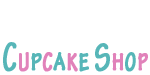
<style>
.page{position:relative;width:150px;height:75px;background:#ffffff}
.page>*{position:absolute;margin:0}
.t1{font:41.6px "TektonPro-BoldCond";color:#57b6b8;font-variant:small-caps;font-weight:bold;scale:0.77 1}
.t2{font:36.4px "TektonPro-BoldCond";color:#e183bb;font-variant:small-caps;font-weight:bold;scale:0.77 1}
.t3{font:36.4px "TektonPro-BoldCond";color:#57b6b8;font-variant:small-caps;font-weight:bold;scale:0.77 1}
.t4{font:36.4px "TektonPro-BoldCond";color:#e182ba;font-variant:small-caps;font-weight:bold;scale:0.77 1}
</style>
<div class="page">
<p class="t1" style="left:3px;top:42px;width:145px;height:30px">C<span class="t2">u</span><span class="t3">p</span><span class="t4">c</span><span class="t3">a</span><span class="t4">k</span><span class="t3">e </span>S<span class="t4">h</span><span class="t3">o</span><span class="t4">p</span></p>
</div>
